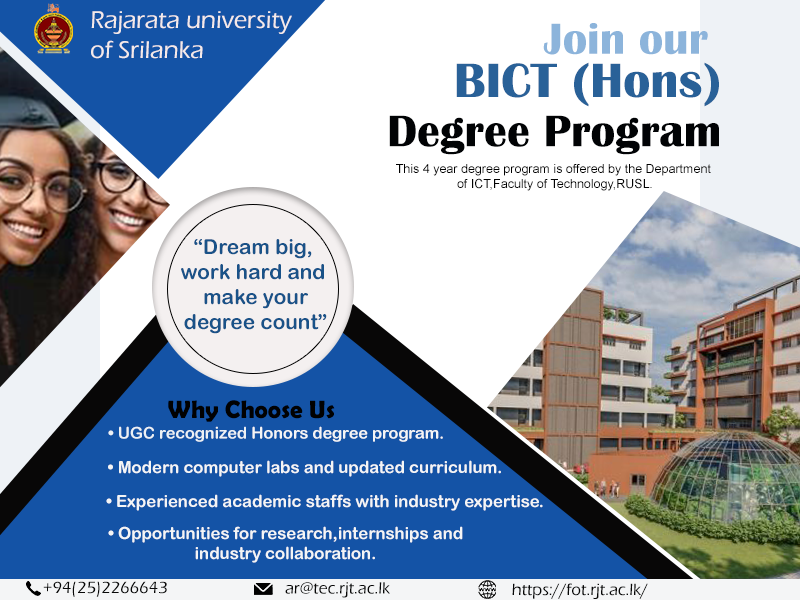
<style>
.page{position:relative;width:800px;height:600px;background:#ffffff}
.page>*{position:absolute;margin:0}
.t1{font:25px "ErasITC-Medium";color:#f4eaea}
.t2{font:45.1px "BritannicBold";color:#8cb4db}
.t3{font:50px "BritannicBold";color:#296198}
.t4{font:45.8px "BritannicBold";color:#010305}
.t5{font:12.5px "ArialMT";color:#010101}
.t6{font:20.8px "ArialRoundedMTBold";color:#195288}
.t7{font:25px "BerlinSansFBDemi-Bold";color:#010101}
.t8{font:16.2px "ArialRoundedMTBold";color:#f4f5f6}
.t9{font:16.2px "ArialRoundedMTBold";color:#ecf1f5}
.t10{font:16.7px "ArialRoundedMTBold";color:#f4f5f6}
.t11{font:16.7px "ErasITC-Medium";color:#080808}
</style>
<div class="page">
<p class="t1" style="left:91px;top:11px;width:201px;height:48px">Rajarata university <br>of Srilanka</p>
<p class="t2" style="left:543px;top:23px;width:165px;height:32px">Join our</p>
<p class="t3" style="left:456px;top:62px;width:263px;height:45px">BICT (Hons)</p>
<p class="t4" style="left:389px;top:115px;width:330px;height:40px">Degree Program</p>
<p class="t5" style="left:396px;top:164px;width:315px;height:27px;text-align:center">This 4 year degree program is offered by the Department <br>of ICT,Faculty of Technology,RUSL.</p>
<p class="t6" style="left:181px;top:239px;width:146px;height:95px;text-align:center">“Dream big,<br>work hard and<br> make your<br> degree count”</p>
<p class="t7" style="left:168px;top:400px;width:167px;height:22px">Why Choose Us</p>
<p class="t8" style="left:108px;top:426px;width:335px;height:16px"><span class="t9">• UGC recognized </span>Honors degree program.</p>
<p class="t10" style="left:108px;top:460px;width:393px;height:17px">• Modern computer labs and updated curriculum.</p>
<p class="t10" style="left:106px;top:494px;width:437px;height:17px">• Experienced academic staffs with industry expertise.</p>
<p class="t10" style="left:108px;top:526px;width:355px;height:37px;text-align:center">• Opportunities for research,internships and <br>industry collaboration.</p>
<p class="t11" style="left:43px;top:581px;width:124px;height:16px">+94(25)2266643</p>
<p class="t11" style="left:285px;top:582px;width:105px;height:16px">ar@tec.rjt.ac.lk</p>
<p class="t11" style="left:512px;top:583px;width:136px;height:16px">https://fot.rjt.ac.lk/</p>
</div>
